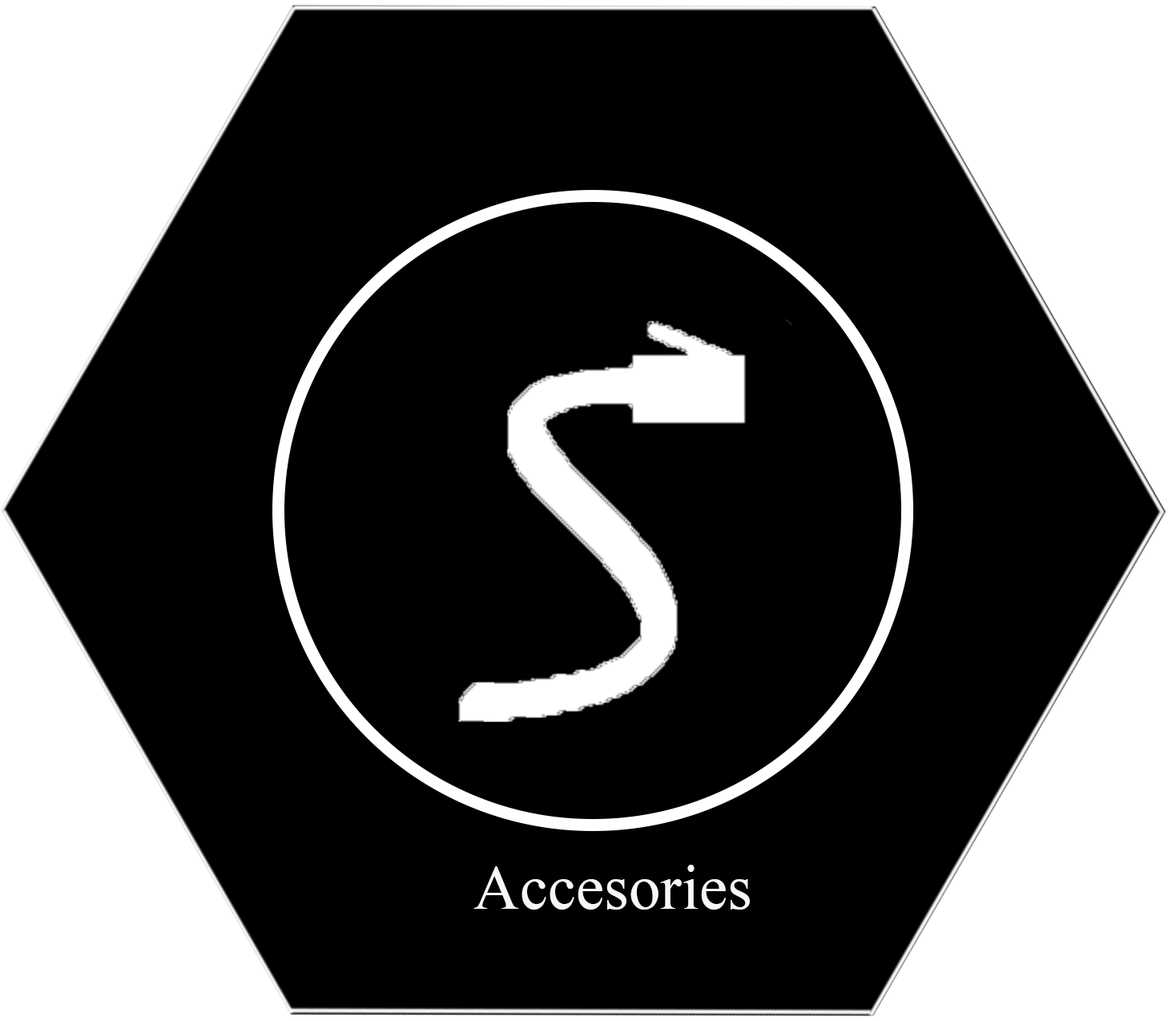
<style>
.page{position:relative;width:1168px;height:1021px;background:#000000}
.page>*{position:absolute;margin:0}
.t1{font:63.4px "TimesNewRomanPSMT";color:#f7f7f7}
</style>
<div class="page">
<p class="t1" style="left:474px;top:865px;width:276px;height:44px">Accesories</p>
</div>
